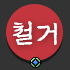
<style>
.page{position:relative;width:70px;height:70px;background:#333333}
.page>*{position:absolute;margin:0}
.t1{font:26.7px "ChosunCentennial";letter-spacing:-0.01em;color:#ffffff}
</style>
<div class="page">
<p class="t1" style="left:12px;top:21px;width:45px;height:24px">철거</p>
</div>
